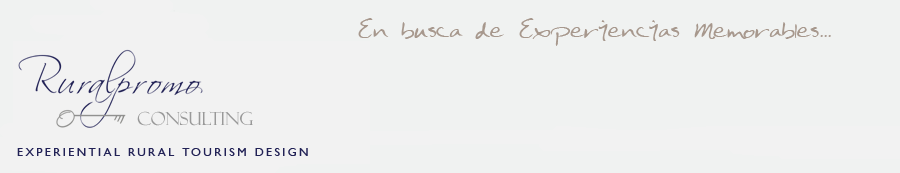
<style>
.page{position:relative;width:900px;height:173px;background:#f0f2f1}
.page>*{position:absolute;margin:0}
.t1{font:30px "Doctor";letter-spacing:-0.025em;color:#a7988d}
.t2{font:18px "FelixTitlingMT";letter-spacing:-0.005em;color:#999999}
.t3{font:12px "GillSansMT";letter-spacing:0.2em;color:#222256}
</style>
<div class="page">
<p class="t1" style="left:358px;top:18px;width:473px;height:28px">En busca de Experiencias Memorables...</p>
<p class="t2" style="left:137px;top:111px;width:116px;height:15px">Consulting</p>
<p class="t3" style="left:17px;top:148px;width:291px;height:8px">EXPERIENTIAL RURAL TOURISM DESIGN</p>
</div>
